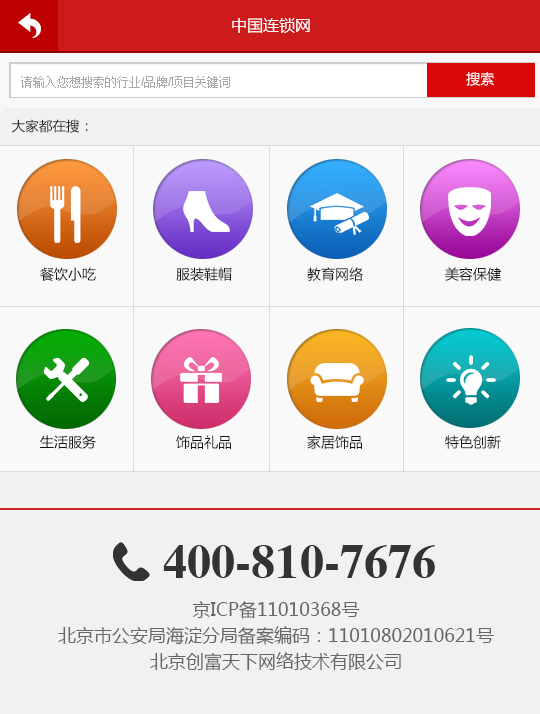
<style>
.page{position:relative;width:540px;height:714px;background:#f1f1f1}
.page>*{position:absolute;margin:0}
.t1{font:16px "MicrosoftYaHei";color:#ffffff}
.t2{font:14px "MicrosoftYaHei";color:#ffffff}
.t3{font:13.6px "MicrosoftYaHei";color:#252525}
.t4{font:14px/24px "MicrosoftYaHei";color:#161616}
.t5{font:47.8px "CTHuPoSF";color:#333333}
.t6{font:18px/26px "MicrosoftYaHei";color:#666666}
</style>
<div class="page">
<p class="t1" style="left:232px;top:18px;width:78px;height:16px">中国连锁网</p>
<p class="t2" style="left:466px;top:72px;width:28px;height:14px">搜索</p>
<p class="t3" style="left:11px;top:119px;width:77px;height:14px">大家都在搜：</p>
<p class="t4" style="left:40px;top:267px;width:56px;height:182px;text-align:justify">餐饮小吃<br><br><br><br><br><br><br>生活服务</p>
<p class="t4" style="left:176px;top:267px;width:56px;height:182px;text-align:justify">服装鞋帽<br><br><br><br><br><br><br>饰品礼品</p>
<p class="t4" style="left:307px;top:267px;width:56px;height:182px;text-align:justify">教育网络<br><br><br><br><br><br><br>家居饰品</p>
<p class="t4" style="left:445px;top:267px;width:56px;height:182px;text-align:justify">美容保健<br><br><br><br><br><br><br>特色创新</p>
<p class="t5" style="left:163px;top:545px;width:272px;height:33px">400-810-7676</p>
<p class="t6" style="left:58px;top:601px;width:436px;height:70px;text-align:center">京ICP备11010368号<br>北京市公安局海淀分局备案编码：11010802010621号<br>北京创富天下网络技术有限公司</p>
</div>
